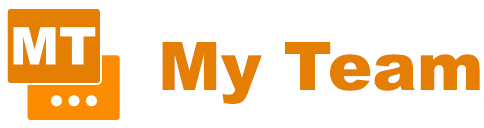
<style>
.page{position:relative;width:484px;height:128px;background:#ffffff}
.page>*{position:absolute;margin:0}
.t1{font:66.7px "Arial-Black";color:#e47f04}
</style>
<div class="page">
<p class="t1" style="left:162px;top:42px;width:318px;height:62px">My Team</p>
</div>
